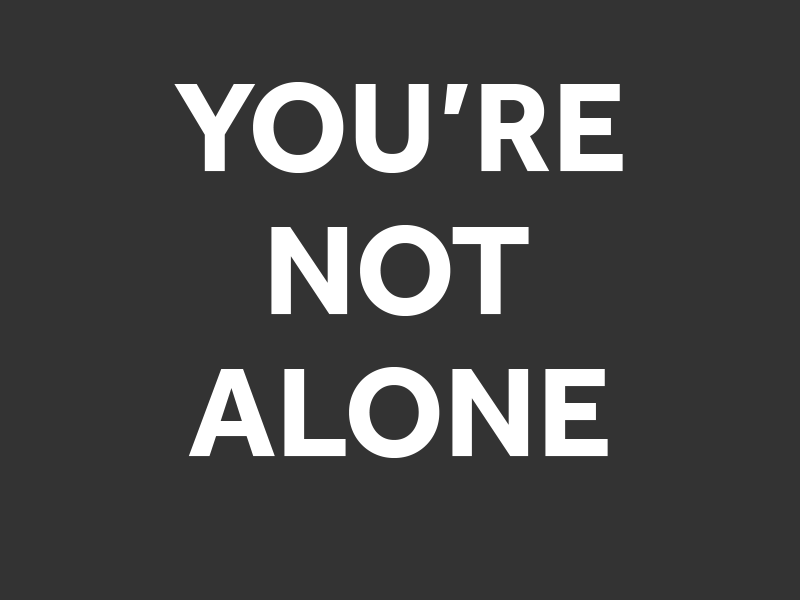
<style>
.page{position:relative;width:800px;height:600px;background:#333333}
.page>*{position:absolute;margin:0}
.t1{font:129.7px "Effra-Bold";color:#ffffff}
</style>
<div class="page">
<p class="t1" style="left:174px;top:82px;width:449px;height:91px">YOU’RE</p>
<p class="t1" style="left:271px;top:225px;width:258px;height:91px">NOT</p>
<p class="t1" style="left:188px;top:367px;width:420px;height:91px">ALONE</p>
</div>
